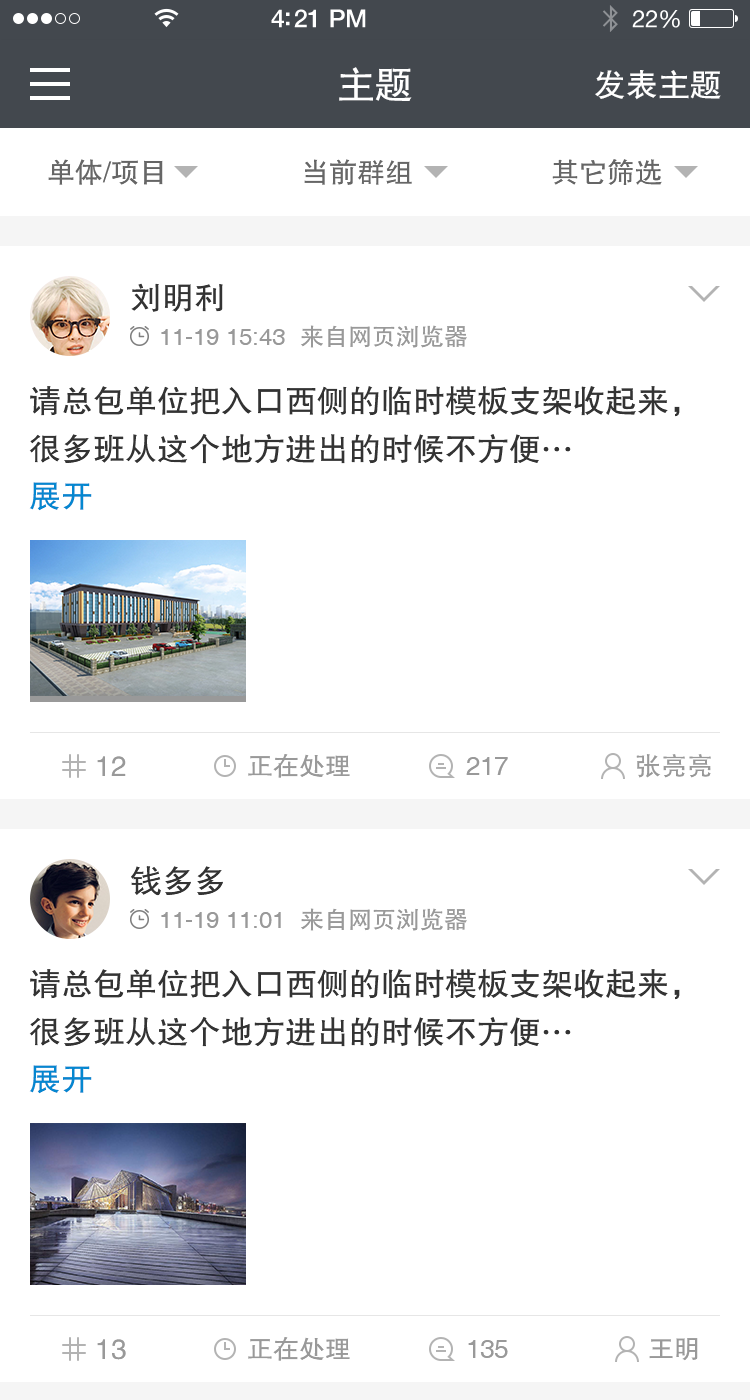
<style>
.page{position:relative;width:750px;height:1400px;background:#ffffff}
.page>*{position:absolute;margin:0}
.t1{font:38px "FZHTJW--GB1-0";color:#ffffff}
.t2{font:32px "FZHTJW--GB1-0";color:#ffffff}
.t3{font:28px "FZHTJW--GB1-0";color:#666666}
.t4{font:32px "FZHTJW--GB1-0";color:#333333}
.t5{font:24px "Helvetica";color:#999999}
.t6{font:24px "FZHTJW--GB1-0";color:#999999}
.t7{font:32px/48px "FZHTJW--GB1-0";color:#333333}
.t8{font:32px "FZHTJW--GB1-0";color:#0487d0}
.t9{font:28px "FZHTJW--GB1-0";color:#999999}
.t10{font:26px "FZHTJW--GB1-0";color:#999999}
.t11{font:26px "Helvetica";color:#999999}
</style>
<div class="page">
<p class="t1" style="left:339px;top:67px;width:73px;height:34px">主题</p>
<p class="t2" style="left:595px;top:70px;width:126px;height:30px">发表主题</p>
<p class="t3" style="left:48px;top:159px;width:115px;height:26px">单体/项目</p>
<p class="t3" style="left:304px;top:159px;width:108px;height:26px">当前群组</p>
<p class="t3" style="left:552px;top:159px;width:110px;height:26px">其它筛选</p>
<p class="t4" style="left:131px;top:283px;width:92px;height:29px">刘明利</p>
<p class="t5" style="left:161px;top:329px;width:124px;height:16px">11-19 15:43</p>
<p class="t6" style="left:301px;top:325px;width:166px;height:23px">来自网页浏览器</p>
<p class="t7" style="left:29px;top:386px;width:651px;height:78px">请总包单位把入口西侧的临时模板支架收起来，<br>很多班从这个地方进出的时候不方便…</p>
<p class="t8" style="left:29px;top:482px;width:63px;height:29px">展开</p>
<p class="t9" style="left:97px;top:756px;width:29px;height:20px">12</p>
<p class="t10" style="left:248px;top:754px;width:102px;height:24px">正在处理</p>
<p class="t11" style="left:466px;top:757px;width:42px;height:18px">217</p>
<p class="t10" style="left:636px;top:754px;width:75px;height:24px">张亮亮</p>
<p class="t4" style="left:131px;top:866px;width:92px;height:30px">钱多多</p>
<p class="t5" style="left:161px;top:912px;width:120px;height:16px">11-19 11:01</p>
<p class="t6" style="left:301px;top:908px;width:166px;height:23px">来自网页浏览器</p>
<p class="t7" style="left:29px;top:969px;width:651px;height:78px">请总包单位把入口西侧的临时模板支架收起来，<br>很多班从这个地方进出的时候不方便…</p>
<p class="t8" style="left:29px;top:1065px;width:63px;height:29px">展开</p>
<p class="t10" style="left:248px;top:1337px;width:102px;height:24px">正在处理</p>
<p class="t9" style="left:97px;top:1339px;width:29px;height:21px">13</p>
<p class="t11" style="left:468px;top:1340px;width:40px;height:18px">135</p>
<p class="t10" style="left:649px;top:1338px;width:49px;height:23px">王明</p>
</div>
